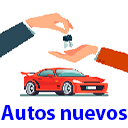
<style>
.page{position:relative;width:128px;height:128px;background:#ffffff}
.page>*{position:absolute;margin:0}
.t1{font:21px "MyriadPro-Bold";color:#0000ff}
</style>
<div class="page">
<p class="t1" style="left:1px;top:105px;width:126px;height:15px">Autos nuevos</p>
</div>
